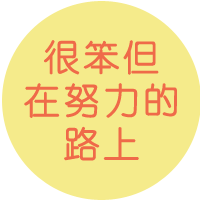
<style>
.page{position:relative;width:200px;height:200px;background:#f5eb8b}
.page>*{position:absolute;margin:0}
.t1{font:36px "YouYuan";letter-spacing:0.075em;color:#ef6a49;font-weight:bold}
</style>
<div class="page">
<p class="t1" style="left:24px;top:40px;width:153px;height:121px;text-align:center">很笨但<br>在努力的<br>路上</p>
</div>
